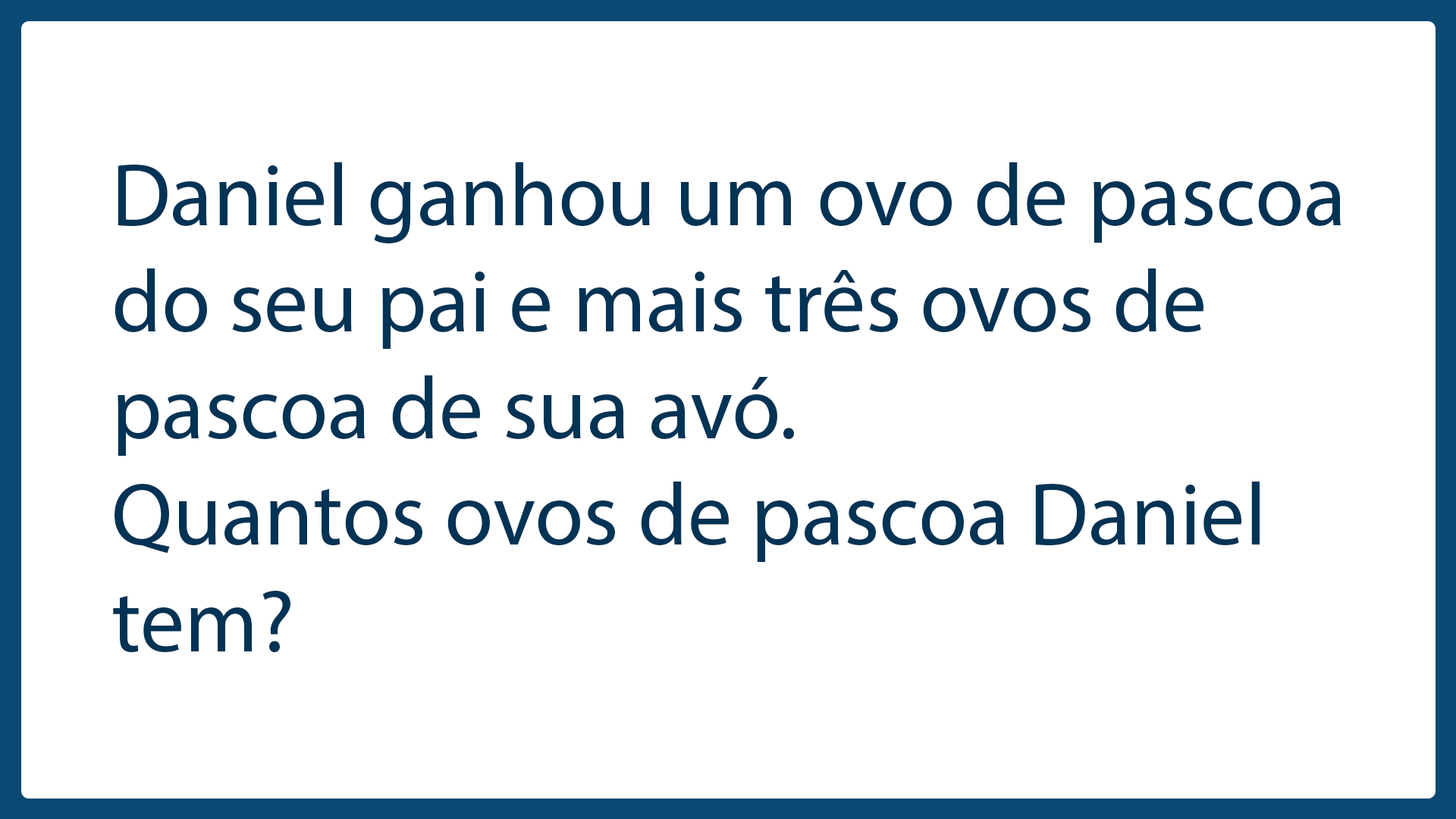
<style>
.page{position:relative;width:1456px;height:819px;background:#ffffff}
.page>*{position:absolute;margin:0}
.t1{font:88.8px "MyriadPro-Regular";color:#003355}
</style>
<div class="page">
<p class="t1" style="left:113px;top:162px;width:1228px;height:491px">Daniel ganhou um ovo de pascoa do seu pai e mais três ovos de pascoa de sua avó.<br>Quantos ovos de pascoa Daniel tem?</p>
</div>
